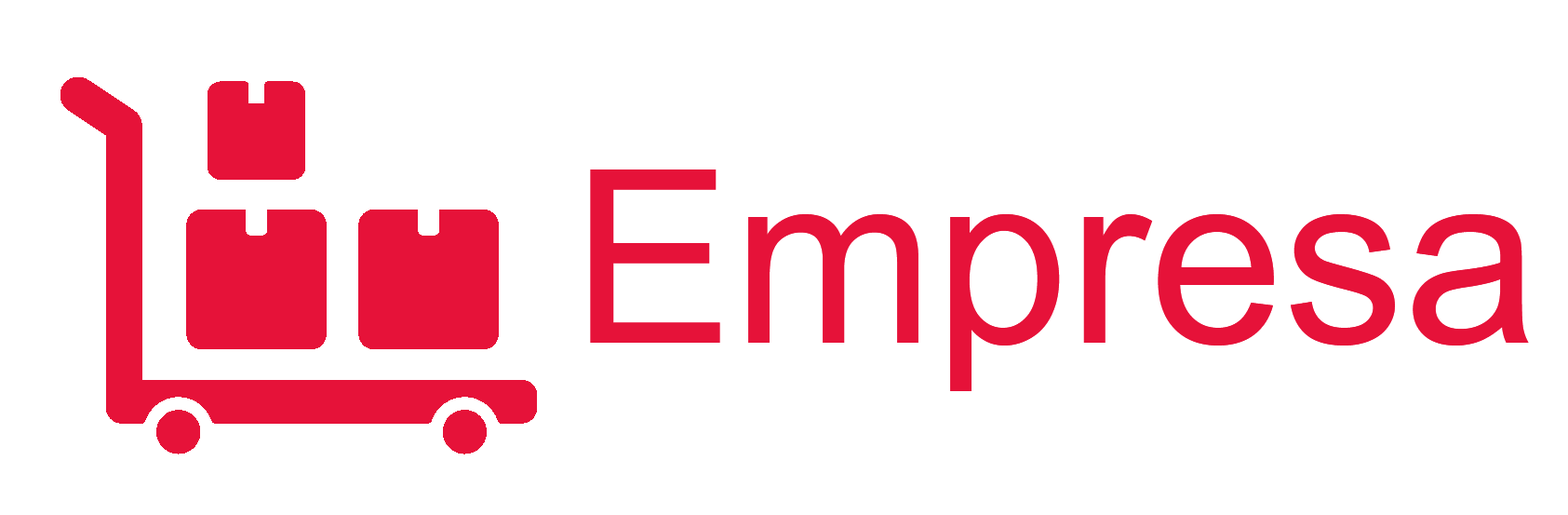
<style>
.page{position:relative;width:1568px;height:515px;background:#ffffff}
.page>*{position:absolute;margin:0}
.t1{font:241.9px "ArialMT";color:#e61239}
</style>
<div class="page">
<p class="t1" style="left:590px;top:169px;width:939px;height:222px">Empresa</p>
</div>
